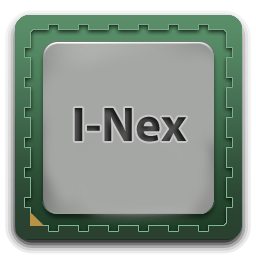
<style>
.page{position:relative;width:256px;height:256px;background:#a5a7a4}
.page>*{position:absolute;margin:0}
.t1{font:49px "MyriadPro-Bold";color:#3c3c3c}
</style>
<div class="page">
<p class="t1" style="left:74px;top:108px;width:113px;height:34px">I-Nex</p>
</div>
